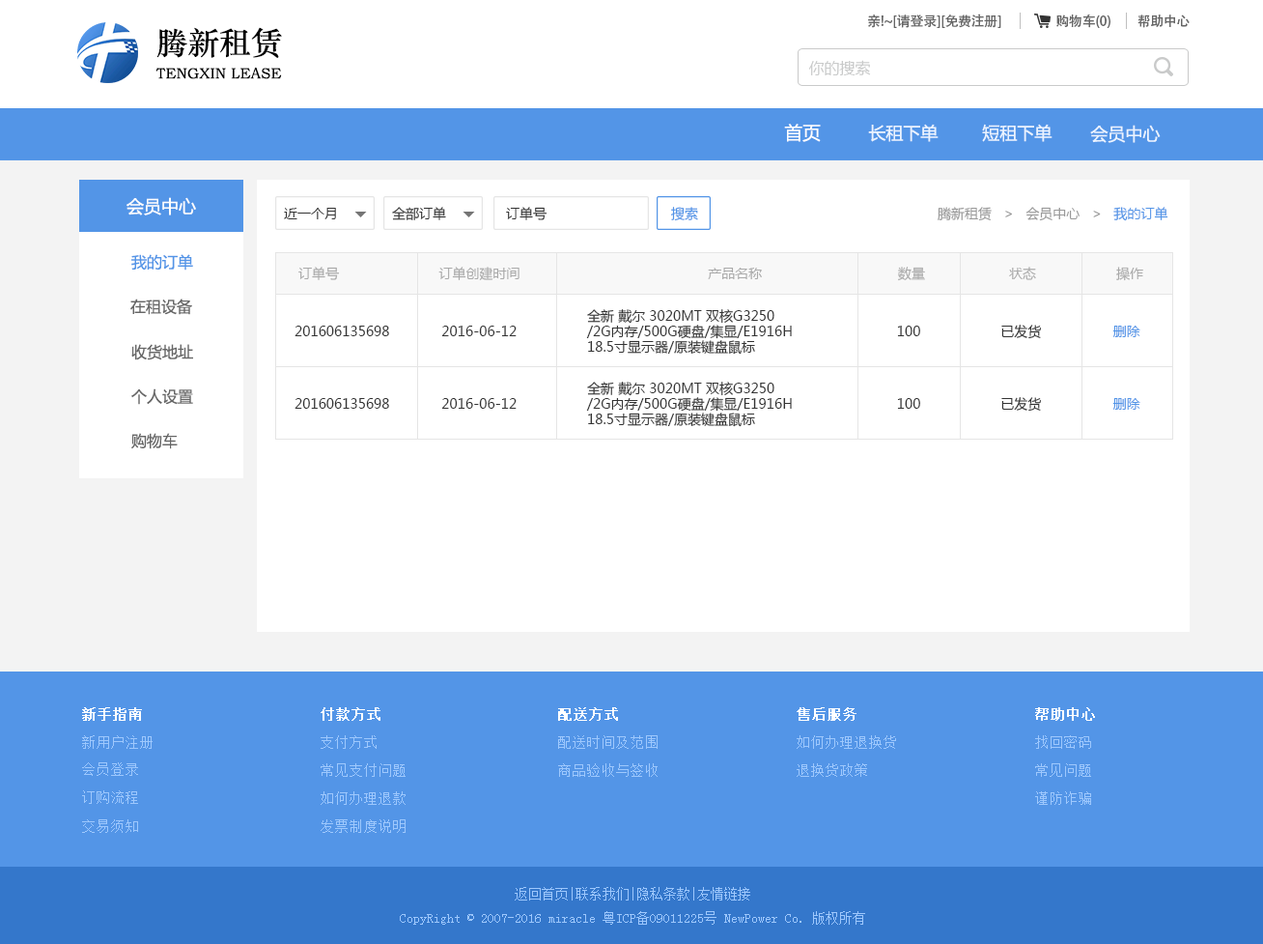
<style>
.page{position:relative;width:1263px;height:944px;background:#ffffff}
.page>*{position:absolute;margin:0}
.t1{font:13.5px "AdobeHeitiStd-Regular";letter-spacing:-0.02em;color:#666666}
.t2{font:31.5px "STZhongsong";color:#000000}
.t3{font:15.5px "MicrosoftYaHei";color:#c9caca}
.t4{font:15px "STZhongsong";color:#000000}
.t5{font:18.1px "MicrosoftYaHei";color:#ffffff}
.t6{font:17.4px "MicrosoftYaHei";color:#eaf3ff}
.t7{font:17.4px "MicrosoftYaHei";color:#fefefe}
.t8{font:13.5px "MicrosoftYaHei";color:#333333}
.t9{font:13.5px "MicrosoftYaHei";color:#5395e7}
.t10{font:13.5px "MicrosoftYaHei";color:#999999}
.t11{font:15.5px "MicrosoftYaHei";color:#5395e7}
.t12{font:13.5px "MicrosoftYaHei";color:#aaaaaa}
.t13{font:15.5px "MicrosoftYaHei";color:#666666}
.t14{font:13.5px/15.5px "MicrosoftYaHei";color:#333333}
.t15{font:14.5px "SimSun";color:#ffffff;font-weight:bold}
.t16{font:14.5px "SimSun";color:#9ec8fd}
.t17{font:13.5px "SimSun";color:#9ec8fd}
</style>
<div class="page">
<p class="t1" style="left:868px;top:14px;width:134px;height:14px">亲!~[请登录][免费注册]</p>
<p class="t1" style="left:1057px;top:14px;width:54px;height:14px">购物车(0)</p>
<p class="t1" style="left:1138px;top:14px;width:52px;height:14px">帮助中心</p>
<p class="t2" style="left:156px;top:27px;width:126px;height:31px">腾新租赁</p>
<p class="t3" style="left:809px;top:60px;width:62px;height:15px">你的搜索</p>
<p class="t4" style="left:156px;top:68px;width:126px;height:11px">TENGXIN LEASE</p>
<p class="t5" style="left:784px;top:124px;width:37px;height:18px">首页</p>
<p class="t6" style="left:868px;top:124px;width:71px;height:18px">长租下单</p>
<p class="t6" style="left:982px;top:124px;width:71px;height:18px">短租下单</p>
<p class="t6" style="left:1091px;top:125px;width:70px;height:18px">会员中心</p>
<p class="t7" style="left:127px;top:197px;width:69px;height:18px">会员中心</p>
<p class="t8" style="left:284px;top:208px;width:52px;height:11px">近一个月</p>
<p class="t8" style="left:392px;top:207px;width:54px;height:13px">全部订单</p>
<p class="t8" style="left:506px;top:207px;width:42px;height:13px">订单号</p>
<p class="t9" style="left:671px;top:207px;width:27px;height:14px">搜索</p>
<p class="t10" style="left:938px;top:207px;width:231px;height:14px">腾新租赁   &gt;   会员中心   &gt;   <span class="t9">我的订单</span></p>
<p class="t11" style="left:131px;top:254px;width:62px;height:16px">我的订单</p>
<p class="t12" style="left:298px;top:267px;width:846px;height:14px">订单号                         订单创建时间                                               产品名称                                  数量                     状态                    操作</p>
<p class="t13" style="left:130px;top:298px;width:62px;height:17px">在租设备</p>
<p class="t14" style="left:586px;top:309px;width:206px;height:46px">全新 戴尔 3020MT 双核G3250<br>/2G内存/500G硬盘/集显/E1916H <br>18.5寸显示器/原装键盘鼠标</p>
<p class="t8" style="left:295px;top:325px;width:846px;height:14px">201606135698             2016-06-12                                                                                               100                    已发货                  <span class="t9">删除</span></p>
<p class="t13" style="left:131px;top:344px;width:62px;height:16px">收货地址</p>
<p class="t13" style="left:131px;top:388px;width:62px;height:17px">个人设置</p>
<p class="t14" style="left:586px;top:382px;width:206px;height:45px">全新 戴尔 3020MT 双核G3250<br>/2G内存/500G硬盘/集显/E1916H <br>18.5寸显示器/原装键盘鼠标</p>
<p class="t8" style="left:295px;top:397px;width:846px;height:15px">201606135698             2016-06-12                                                                                               100                    已发货                  <span class="t9">删除</span></p>
<p class="t13" style="left:131px;top:433px;width:47px;height:16px">购物车</p>
<p class="t15" style="left:82px;top:707px;width:60px;height:14px">新手指南</p>
<p class="t15" style="left:321px;top:707px;width:60px;height:14px">付款方式</p>
<p class="t15" style="left:558px;top:707px;width:60px;height:14px">配送方式</p>
<p class="t15" style="left:797px;top:707px;width:60px;height:14px">售后服务</p>
<p class="t15" style="left:1036px;top:707px;width:59px;height:14px">帮助中心</p>
<p class="t16" style="left:82px;top:735px;width:71px;height:14px">新用户注册</p>
<p class="t16" style="left:321px;top:735px;width:56px;height:14px">支付方式</p>
<p class="t16" style="left:558px;top:735px;width:100px;height:14px">配送时间及范围</p>
<p class="t16" style="left:797px;top:735px;width:99px;height:14px">如何办理退换货</p>
<p class="t16" style="left:1036px;top:735px;width:56px;height:14px">找回密码</p>
<p class="t16" style="left:82px;top:762px;width:56px;height:14px">会员登录</p>
<p class="t16" style="left:321px;top:763px;width:85px;height:14px">常见支付问题</p>
<p class="t16" style="left:558px;top:763px;width:100px;height:14px">商品验收与签收</p>
<p class="t16" style="left:797px;top:763px;width:70px;height:14px">退换货政策</p>
<p class="t16" style="left:1036px;top:763px;width:56px;height:14px">常见问题</p>
<p class="t16" style="left:82px;top:790px;width:56px;height:14px">订购流程</p>
<p class="t16" style="left:321px;top:791px;width:85px;height:14px">如何办理退款</p>
<p class="t16" style="left:1036px;top:791px;width:56px;height:14px">谨防诈骗</p>
<p class="t16" style="left:82px;top:819px;width:56px;height:14px">交易须知</p>
<p class="t16" style="left:321px;top:819px;width:85px;height:14px">发票制度说明</p>
<p class="t17" style="left:400px;top:887px;width:466px;height:37px;text-align:center">返回首页|联系我们|隐私条款|友情链接<br>CopyRight © 2007-2016 miracle 粤ICP备09011225号 NewPower Co. 版权所有</p>
</div>
